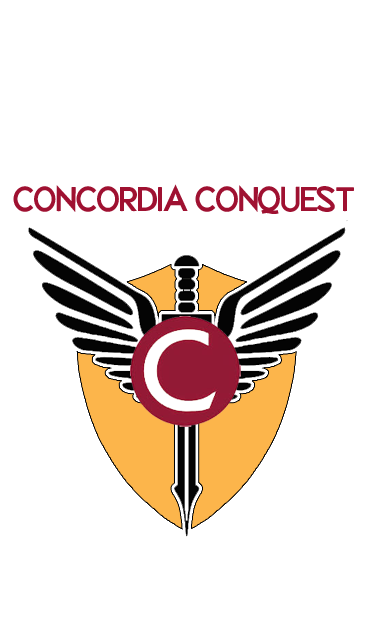
<style>
.page{position:relative;width:365px;height:644px;background:#ffffff}
.page>*{position:absolute;margin:0}
.t1{font:24px "zaguatica-Bold";color:#9f1131}
</style>
<div class="page">
<p class="t1" style="left:13px;top:184px;width:341px;height:30px">CONCORDIA CONQUEST</p>
</div>
